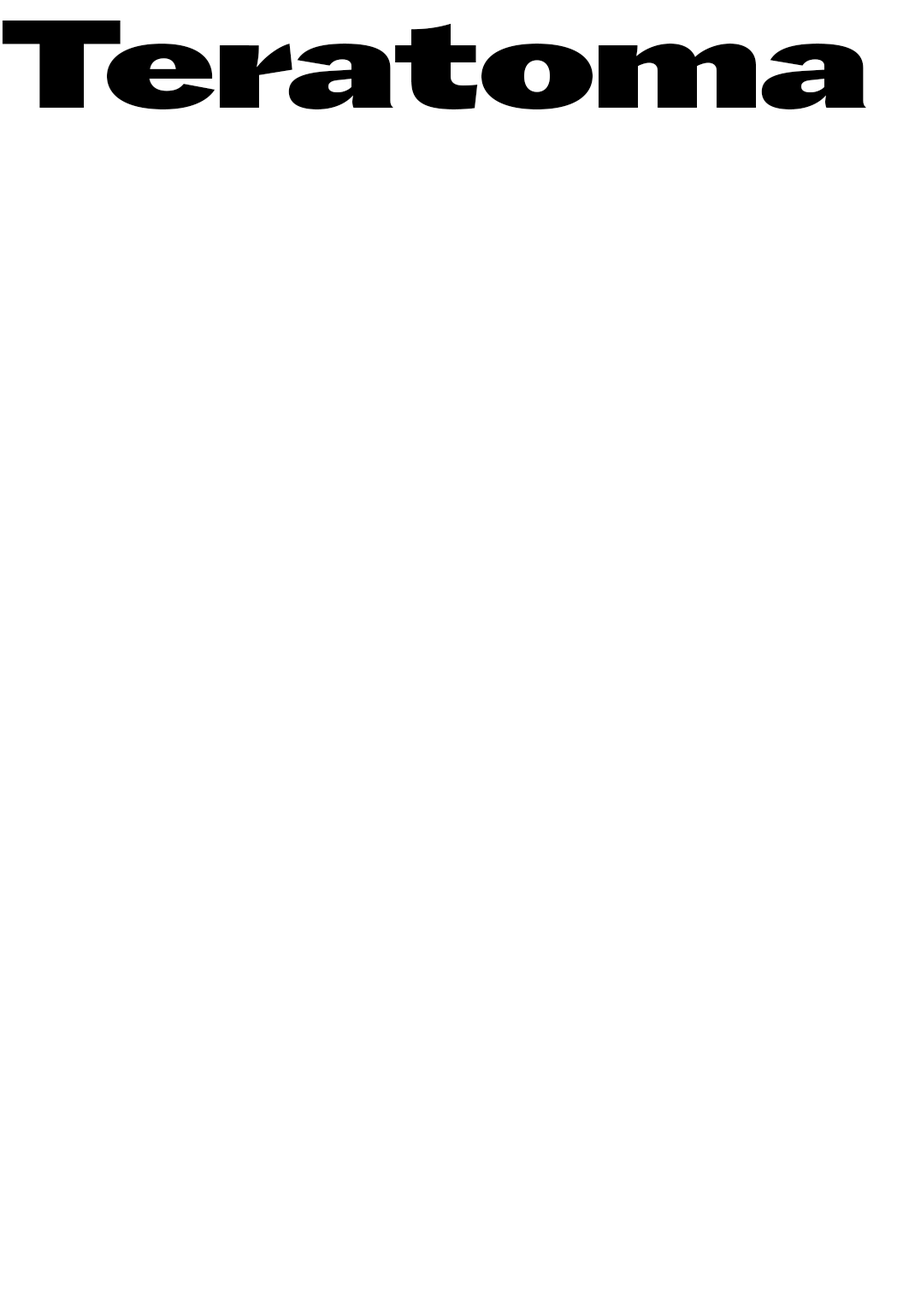
<style>
.page{position:relative;width:909px;height:1312px;background:#ffffff}
.page>*{position:absolute;margin:0}
.t1{font:124.7px "MursGothic-MassiveBlack";color:#000000}
</style>
<div class="page">
<p class="t1" style="left:2px;top:21px;width:864px;height:89px">Teratoma</p>
</div>
